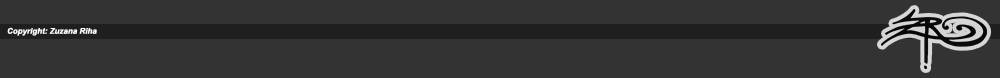
<style>
.page{position:relative;width:1000px;height:78px;background:#333333}
.page>*{position:absolute;margin:0}
.t1{font:8px "Arial-BoldItalicMT";color:#ffffff}
</style>
<div class="page">
<p class="t1" style="left:7px;top:27px;width:90px;height:9px">Copyright: Zuzana Riha</p>
</div>
